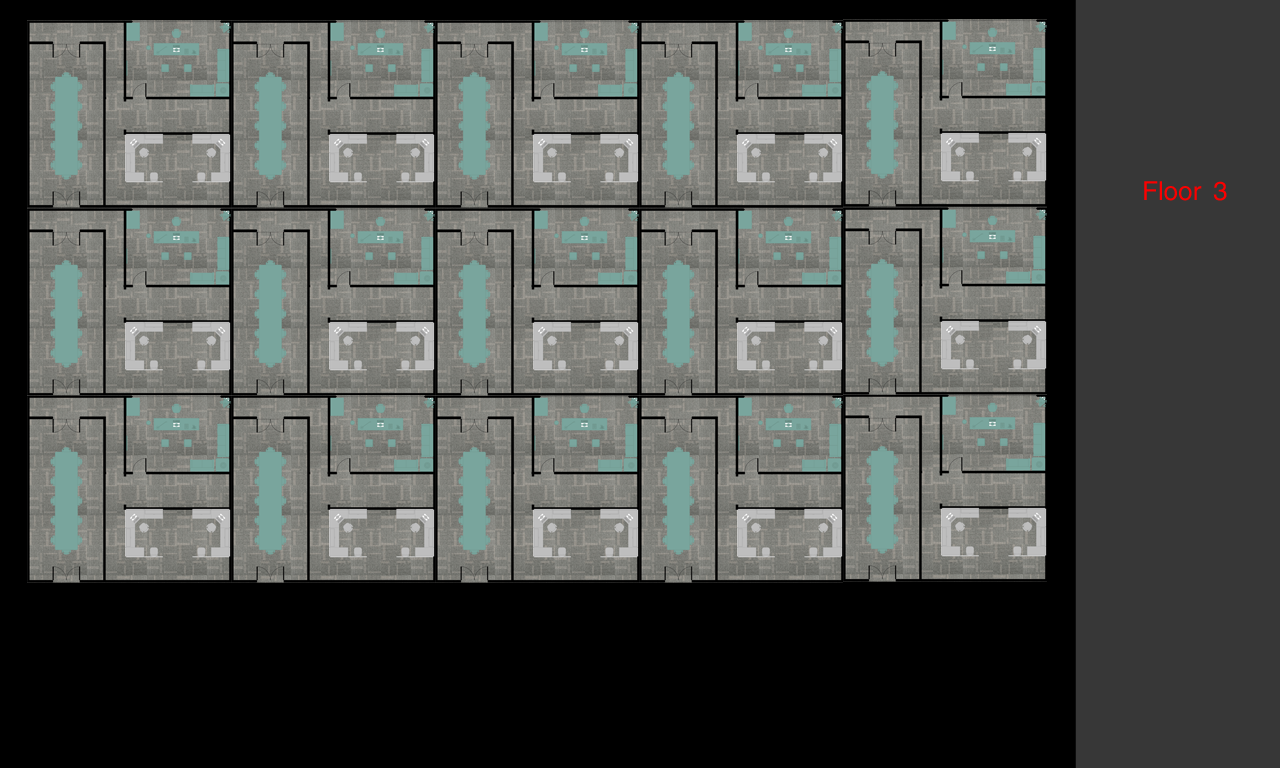
<style>
.page{position:relative;width:1280px;height:768px;background:#000000}
.page>*{position:absolute;margin:0}
.t1{font:26px "Yoxall";color:#fc0000}
</style>
<div class="page">
<p class="t1" style="left:1144px;top:181px;width:83px;height:20px">Floor 3</p>
</div>
